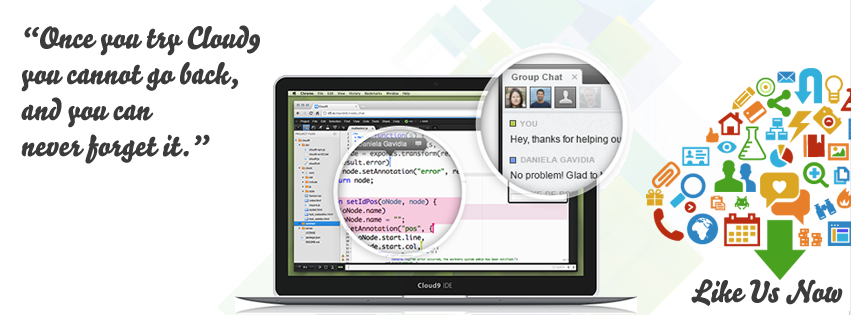
<style>
.page{position:relative;width:851px;height:315px;background:#ffffff}
.page>*{position:absolute;margin:0}
.t1{font:30px "Bello-Script";color:#3b3b3b}
</style>
<div class="page">
<p class="t1" style="left:21px;top:25px;width:239px;height:139px">“Once you try Cloud9 <br>you cannot go back, <br>and you can <br>never forget it.”</p>
<p class="t1" style="left:691px;top:279px;width:152px;height:27px">Like Us Now</p>
</div>
